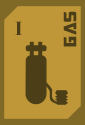
<style>
.page{position:relative;width:85px;height:125px;background:#bf9739}
.page>*{position:absolute;margin:0}
.t1{font:20px "TransformersMovie";letter-spacing:0.04em;color:#4c3f17}
.t2{font:20px "TimesNewRomanPS-BoldMT";letter-spacing:-0.04em;color:#4c3f17}
</style>
<div class="page">
<p class="t1" style="left:63px;top:11px;width:14px;height:36px;rotate:-90deg">Gas</p>
<p class="t2" style="left:15px;top:21px;width:7px;height:14px">I</p>
</div>
